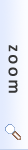
<style>
.page{position:relative;width:28px;height:150px}
.page>*{position:absolute;margin:0}
.t1{font:18px "Calibri";letter-spacing:0.14em;color:#363636;font-weight:bold}
</style>
<div class="page">
<p class="t1" style="left:8px;top:45px;width:10px;height:48px;rotate:90deg">zoom</p>
</div>
